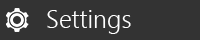
<style>
.page{position:relative;width:200px;height:40px;background:#333333}
.page>*{position:absolute;margin:0}
.t1{font:25px "SegoeUI-Semilight";color:#ffffff}
</style>
<div class="page">
<p class="t1" style="left:47px;top:10px;width:84px;height:24px">Settings</p>
</div>
